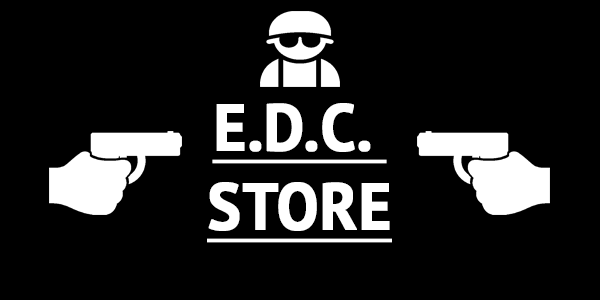
<style>
.page{position:relative;width:600px;height:300px;background:#000000}
.page>*{position:absolute;margin:0}
.t1{font:65.8px "PTSans-Bold";color:#ffffff;text-transform:uppercase;font-weight:bold;text-decoration:underline;scale:0.94 1}
</style>
<div class="page">
<p class="t1" style="left:207px;top:103px;width:185px;height:140px;text-align:center">E.d.c. <br>Store</p>
</div>
